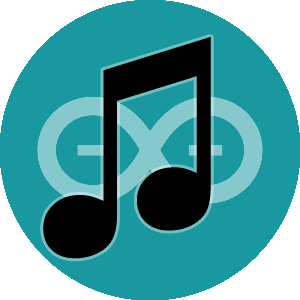
<style>
.page{position:relative;width:300px;height:300px;background:#19999f}
.page>*{position:absolute;margin:0}
.t1{font:275.3px "ArialMT";color:#000000;font-variant:small-caps}
</style>
<div class="page">
<p class="t1" style="left:43px;top:37px;width:168px;height:222px">♫</p>
</div>
